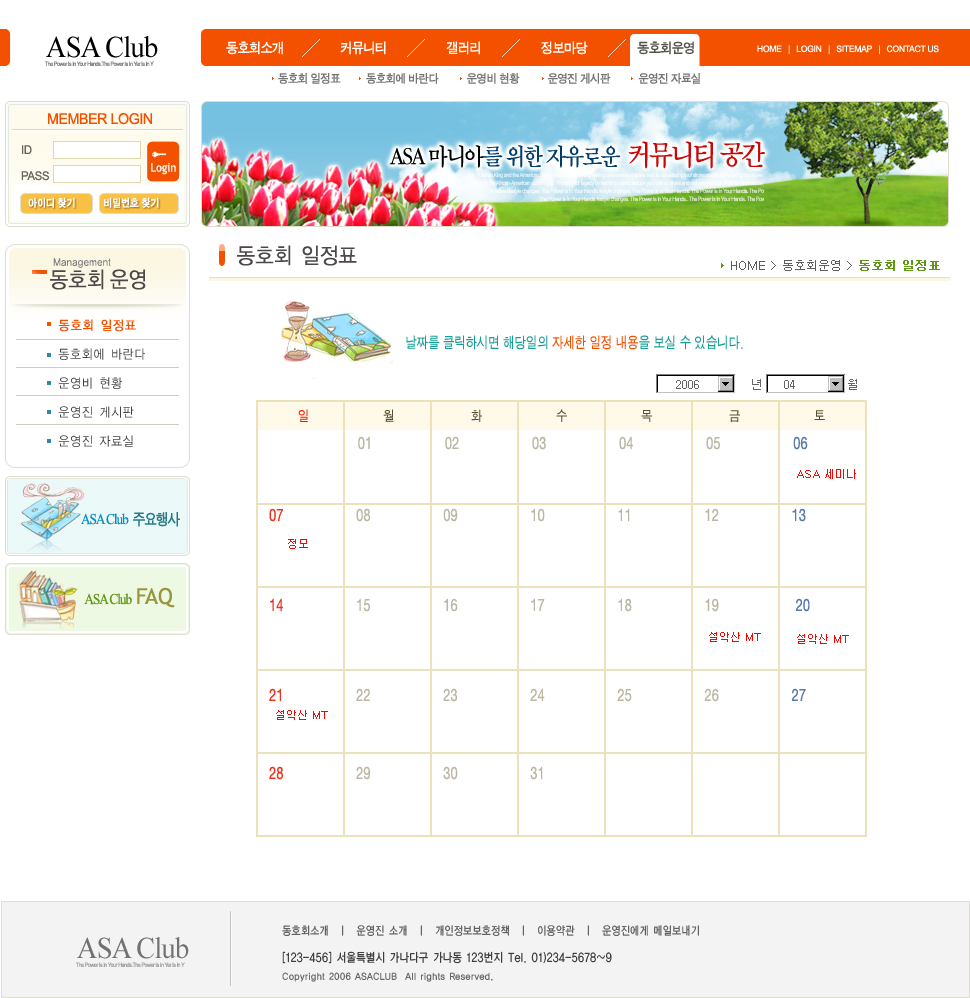
<style>
.page{position:relative;width:970px;height:998px;background:#ffffff}
.page>*{position:absolute;margin:0}
.t1{font:30px "TimesNewRomanPSMT";letter-spacing:-0.03em;color:#000000;scale:0.95 1}
.t2{font:14px "SandTg";letter-spacing:-0.03em;color:#ffffff;scale:0.95 1}
.t3{font:14px "SandTg";letter-spacing:-0.03em;color:#545249;scale:0.95 1}
.t4{font:9px "ArialMT";letter-spacing:-0.03em;color:#ffffff;scale:0.95 1}
.t5{font:12px "SandTg";letter-spacing:-0.03em;color:#757574;scale:0.95 1}
.t6{font:15px "ArialMT";letter-spacing:-0.03em;color:#f35000;scale:0.95 1}
.t7{font:12px/26px "ArialMT";letter-spacing:-0.03em;color:#6d6460;scale:0.95 1}
.t8{font:12px/24px "ArialMT";letter-spacing:-0.03em;color:#6d6460;scale:0.95 1}
.t9{font:25px "SandTm";letter-spacing:-0.075em;color:#003c6c;scale:0.88 1}
.t10{font:30px "TimesNewRomanPSMT";letter-spacing:-0.075em;color:#313131;scale:0.88 1}
.t11{font:25px "SandTm";letter-spacing:-0.075em;color:#000000;scale:0.88 1}
.t12{font:30px "SandTm";letter-spacing:-0.075em;color:#cb0707;scale:0.88 1}
.t13{font:12px "TrebuchetMS";color:#ffffff;scale:0.9 1}
.t14{font:11px "SandKg";color:#ffffff;scale:0.9 1}
.t15{font:22px "YGO12";letter-spacing:-0.06em;color:#4d4848;scale:0.9 1}
.t16{font:10px "YGO12";letter-spacing:-0.06em;color:#7b7b7b;scale:0.9 1}
.t17{font:12px "Dotum";color:#5c5c5c}
.t18{font:12px "Dotum";color:#629615;font-weight:bold}
.t19{font:13px/29px "YGO12";color:#424242;scale:0.9 1}
.t20{font:13px "YGO12";color:#f35000;font-weight:bold;scale:0.9 1}
.t21{font:15.4px "SandTg";color:#169d95;scale:0.82 1}
.t22{font:15.4px "SandTg";color:#f35000;scale:0.82 1}
.t23{font:12px "Dotum";color:#666666}
.t24{font:14px "SandTg";letter-spacing:-0.025em;color:#585131;scale:0.9 1}
.t25{font:14px "SandTg";letter-spacing:-0.025em;color:#f31d00;scale:0.9 1}
.t26{font:17.6px/18px "SandTg";color:#bab6a3;scale:0.82 1}
.t27{font:17.6px/18px "SandTg";color:#169d95;scale:0.82 1}
.t28{font:17.6px/18px "SandTg";color:#577aa9;scale:0.82 1}
.t29{font:17.6px/18px "SandTg";color:#ed3421;scale:0.82 1}
.t30{font:17.6px/24px "SandTg";color:#ed3421;scale:0.82 1}
.t31{font:17.6px/24px "SandTg";color:#bab6a3;scale:0.82 1}
.t32{font:11px "Dotum";color:#ff0101}
.t33{font:15px "TimesNewRomanPSMT";letter-spacing:-0.075em;color:#0a8dc4;scale:0.88 1}
.t34{font:16px "SandTg";letter-spacing:-0.075em;color:#277b88;scale:0.88 1}
.t35{font:15px "TimesNewRomanPSMT";letter-spacing:-0.075em;color:#629615;scale:0.88 1}
.t36{font:18px "SandTg";letter-spacing:-0.075em;color:#629615;scale:0.88 1}
.t37{font:22px "TrebuchetMS";color:#999640}
.t38{font:11.6px "YGO12";letter-spacing:-0.025em;color:#585858;scale:0.83 1}
.t39{font:30px "TimesNewRomanPSMT";letter-spacing:-0.03em;color:#737272;scale:0.95 1}
.t40{font:12.1px/18px "YGO12";letter-spacing:-0.025em;color:#333232;scale:0.82 1}
.t41{font:9px/18px "YGO12";letter-spacing:-0.01em;color:#676767;scale:0.9 1}
</style>
<div class="page">
<p class="t1" style="left:46px;top:36px;width:112px;height:22px">ASA Club</p>
<p class="t2" style="left:226px;top:41px;width:468px;height:14px">동호회소개                 커뮤니티                  갤러리                  정보마당               <span class="t3">동호회운영</span></p>
<p class="t4" style="left:757px;top:45px;width:182px;height:9px">HOME   |   LOGIN   |   SITEMAP   |   CONTACT US</p>
<p class="t5" style="left:278px;top:73px;width:422px;height:11px">동호회 일정표         동호회에 바란다          운영비 현황          운영진 게시판          운영진 자료실</p>
<p class="t6" style="left:48px;top:113px;width:104px;height:12px">MEMBER LOGIN</p>
<p class="t7" style="left:21px;top:145px;width:28px;height:36px"><span class="t8">ID<br></span>PASS</p>
<p class="t9" style="left:389px;top:141px;width:376px;height:28px"><span class="t10">                                     <br></span><span class="t11">ASA 마니아</span>를 위한 자유로운  <span class="t12">커뮤니티 공간</span></p>
<p class="t13" style="left:151px;top:163px;width:25px;height:12px">Login</p>
<p class="t14" style="left:28px;top:197px;width:131px;height:11px">아이디 찾기          비밀번호 찾기</p>
<p class="t15" style="left:237px;top:245px;width:120px;height:21px">동호회 일정표</p>
<p class="t15" style="left:50px;top:269px;width:96px;height:21px">동호회 운영</p>
<p class="t16" style="left:53px;top:258px;width:58px;height:10px">Management</p>
<p class="t17" style="left:731px;top:260px;width:209px;height:11px">HOME &gt; 동호회운영 &gt; <span class="t18">동호회 일정표</span></p>
<p class="t19" style="left:58px;top:319px;width:87px;height:128px"><span class="t20">동호회 일정표<br></span>동호회에 바란다<br>운영비 현황<br>운영진 게시판<br>운영진 자료실</p>
<p class="t21" style="left:406px;top:335px;width:337px;height:15px">날짜를 클릭하시면 해당일의 <span class="t22">자세한 일정 내용</span>을 보실 수 있습니다.</p>
<p class="t23" style="left:676px;top:379px;width:181px;height:11px">2006             년     04             월</p>
<p class="t24" style="left:298px;top:409px;width:527px;height:13px"><span class="t25">일                     </span>  월                        화                       수                       목                        금                       토</p>
<p class="t26" style="left:269px;top:436px;width:541px;height:344px"><span class="t27">                    </span>  01                  02                  03                  04                  05                 <span class="t28"> 06<br><br><br>                 <br></span><span class="t29">07 </span>                 08                  09                  10                  11                  12                  <span class="t28">13<br><br><br><br><br></span><span class="t29">14</span>                  15                  16                  17                  18                  19                  <span class="t28"> 20<br>  <br><br><br><br></span><span class="t29">21</span>                  22                  23                  24                  25                  26                  <span class="t28">27<br><br><br><br></span><span class="t30">28  </span><span class="t31">                29                  30                  31</span></p>
<p class="t32" style="left:797px;top:469px;width:59px;height:10px">ASA 세미나</p>
<p class="t33" style="left:81px;top:512px;width:99px;height:15px">ASA Club  <span class="t34">주요행사</span></p>
<p class="t32" style="left:288px;top:539px;width:20px;height:10px">정모</p>
<p class="t35" style="left:84px;top:587px;width:91px;height:21px"><span class="t36">     </span>ASA Club  <span class="t37">FAQ</span></p>
<p class="t32" style="left:709px;top:632px;width:52px;height:10px">설악산 MT</p>
<p class="t32" style="left:797px;top:634px;width:52px;height:10px">설악산 MT</p>
<p class="t32" style="left:276px;top:710px;width:52px;height:10px">설악산 MT</p>
<p class="t38" style="left:282px;top:925px;width:417px;height:11px">동호회소개  ㅣ  운영진 소개  ㅣ  개인정보보호정책  ㅣ  이용약관  ㅣ  운영진에게 메일보내기</p>
<p class="t39" style="left:77px;top:937px;width:112px;height:22px">ASA Club</p>
<p class="t40" style="left:282px;top:951px;width:330px;height:31px">[123-456] 서울특별시 가나다구 가나동 123번지 Tel. 01)234-5678~9<br><span class="t41">Copyright 2006 ASACLUB  All rights Reserved.</span></p>
</div>
